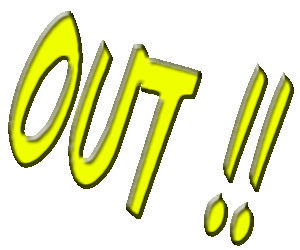
<style>
.page{position:relative;width:300px;height:250px;background:#ffffff}
.page>*{position:absolute;margin:0}
.t1{font:238.1px "FastAction";scale:0.54 1}
</style>
<div class="page">
<p class="t1" style="left:8px;top:11px;width:286px;height:235px;rotate:19deg">OUT !!</p>
</div>
